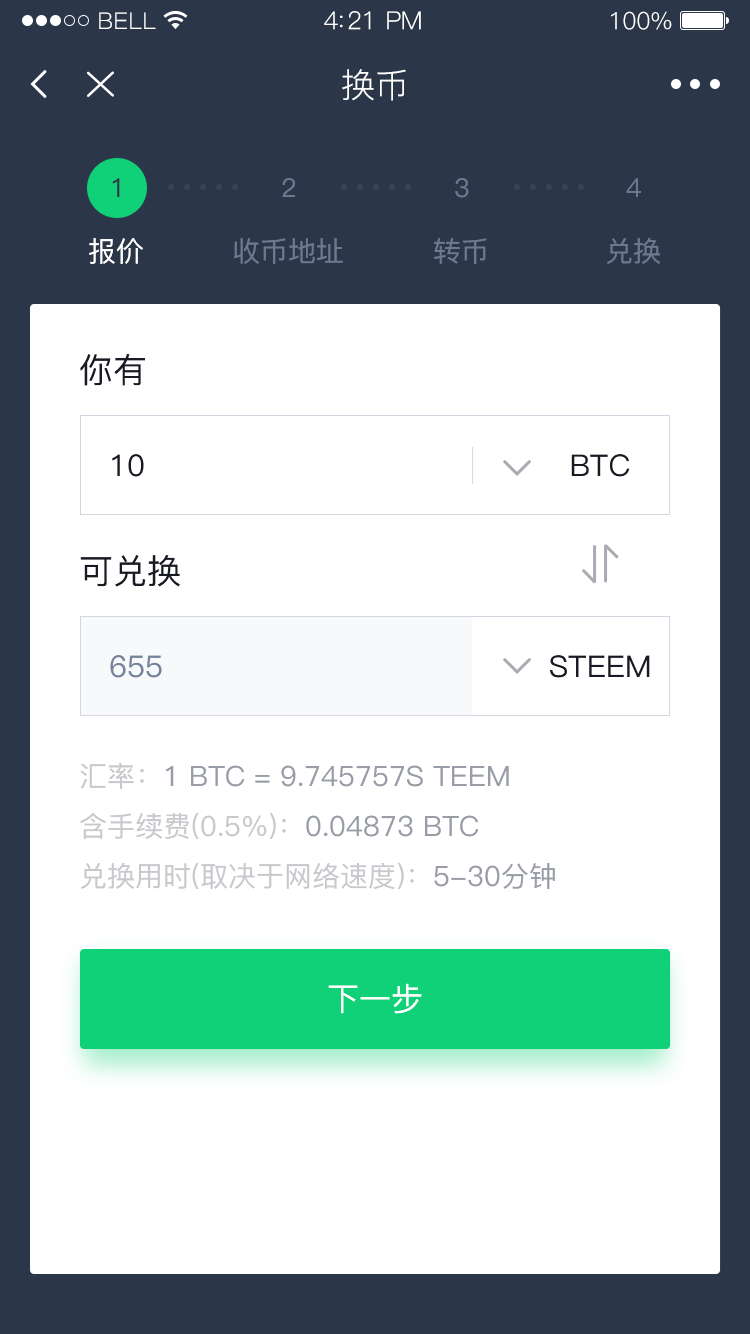
<style>
.page{position:relative;width:750px;height:1334px;background:#ffffff}
.page>*{position:absolute;margin:0}
.t1{font:23px "PingFang-SC-Regular";letter-spacing:0.02em;color:#ffffff}
.t2{font:25px "PingFang-SC-Regular";letter-spacing:-0.02em;color:#ffffff}
.t3{font:24px "PingFang-SC-Regular";letter-spacing:-0.02em;color:#ffffff}
.t4{font:34px "PingFang-SC-Regular";color:#ffffff}
.t5{font:26px "PingFang-SC-Medium";color:#2b3749}
.t6{font:26px "PingFang-SC-Medium";color:#6e7991}
.t7{font:28px "PingFang-SC-Medium";color:#ffffff}
.t8{font:28px "PingFang-SC-Medium";color:#6e7991}
.t9{font:34px "PingFang-SC-Medium";color:#181b23}
.t10{font:30px "PingFang-SC-Medium";color:#181b23}
.t11{font:30px "PingFang-SC-Medium";color:#76839b}
.t12{font:28px/50px "PingFang-SC-Medium";color:#999da7}
.t13{font:28px/50px "PingFang-SC-Medium";color:#c7c9cd}
.t14{font:32px "PingFang-SC-Medium";color:#ffffff}
</style>
<div class="page">
<p class="t1" style="left:99px;top:12px;width:57px;height:17px">BELL</p>
<p class="t2" style="left:324px;top:11px;width:97px;height:19px">4:21 PM</p>
<p class="t3" style="left:611px;top:11px;width:61px;height:19px">100%</p>
<p class="t4" style="left:342px;top:69px;width:64px;height:32px">换币</p>
<p class="t5" style="left:112px;top:178px;width:8px;height:19px">1</p>
<p class="t6" style="left:282px;top:178px;width:13px;height:19px">2</p>
<p class="t6" style="left:455px;top:178px;width:14px;height:20px">3</p>
<p class="t6" style="left:626px;top:178px;width:15px;height:19px">4</p>
<p class="t7" style="left:89px;top:238px;width:54px;height:26px">报价</p>
<p class="t8" style="left:234px;top:238px;width:109px;height:26px">收币地址</p>
<p class="t8" style="left:434px;top:238px;width:53px;height:26px">转币</p>
<p class="t8" style="left:606px;top:238px;width:54px;height:26px">兑换</p>
<p class="t9" style="left:80px;top:354px;width:65px;height:32px">你有</p>
<p class="t10" style="left:112px;top:454px;width:32px;height:23px">10</p>
<p class="t10" style="left:571px;top:454px;width:59px;height:23px">BTC</p>
<p class="t9" style="left:80px;top:555px;width:100px;height:32px">可兑换</p>
<p class="t11" style="left:110px;top:655px;width:52px;height:23px">655</p>
<p class="t10" style="left:550px;top:655px;width:100px;height:23px">STEEM</p>
<p class="t12" style="left:80px;top:762px;width:475px;height:127px"><span class="t13">汇率：</span>1 BTC = 9.745757S TEEM<br><span class="t13">含手续费(0.5%)：</span>0.04873 BTC<br><span class="t13">兑换用时(取决于网络速度)：</span>5-30分钟</p>
<p class="t14" style="left:328px;top:983px;width:94px;height:31px">下一步</p>
</div>
